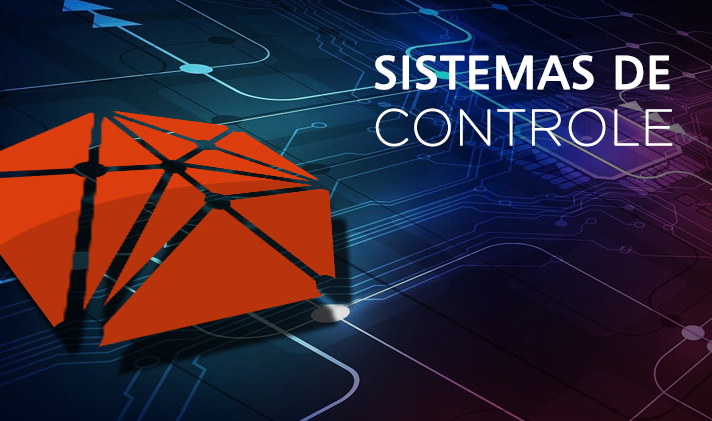
<style>
.page{position:relative;width:712px;height:421px}
.page>*{position:absolute;margin:0}
.t1{font:46.9px/56.3px "Humanist777BT-RomanB";letter-spacing:0.01em;color:#ffffff;font-weight:bold}
.t2{font:50px/56.3px "GothamThin";letter-spacing:0.01em;color:#ffffff;font-weight:bold}
</style>
<div class="page">
<p class="t1" style="left:375px;top:55px;width:298px;height:92px">SISTEMAS DE<br><span class="t2">CONTROLE</span></p>
</div>
